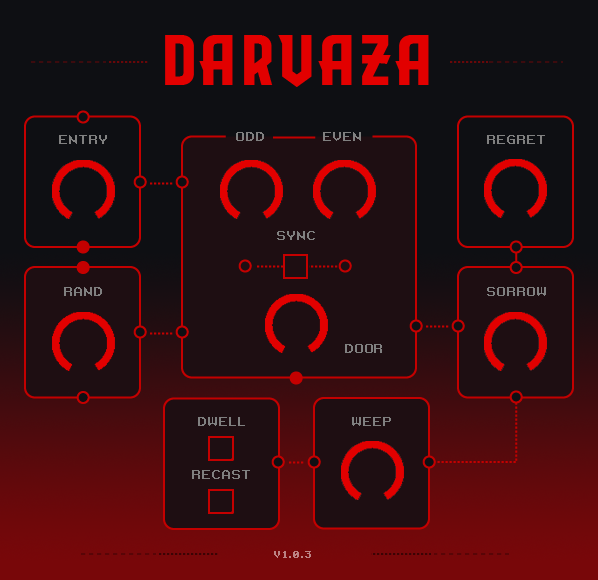
<style>
.page{position:relative;width:598px;height:580px;background:#0e0f13}
.page>*{position:absolute;margin:0}
.t1{font:72px "EvilEmpire";letter-spacing:0.08em;color:#e20000;text-transform:uppercase}
.t2{font:12px "RetroGaming";letter-spacing:0.08em;color:#808080;text-transform:uppercase}
.t3{font:10px "RetroGaming";letter-spacing:0.075em;color:#bc8384}
</style>
<div class="page">
<p class="t1" style="left:165px;top:35px;width:264px;height:52px">DARVAZA</p>
<p class="t2" style="left:59px;top:135px;width:48px;height:9px">entry</p>
<p class="t2" style="left:236px;top:132px;width:28px;height:9px">odd</p>
<p class="t2" style="left:323px;top:132px;width:38px;height:9px">even</p>
<p class="t2" style="left:487px;top:135px;width:58px;height:9px">regret</p>
<p class="t2" style="left:277px;top:231px;width:38px;height:9px">sync</p>
<p class="t2" style="left:64px;top:287px;width:38px;height:9px">rand</p>
<p class="t2" style="left:487px;top:287px;width:59px;height:9px">sorrow</p>
<p class="t2" style="left:345px;top:344px;width:37px;height:9px">door</p>
<p class="t2" style="left:198px;top:417px;width:47px;height:9px">dwell</p>
<p class="t2" style="left:352px;top:417px;width:39px;height:9px">weep</p>
<p class="t2" style="left:192px;top:470px;width:58px;height:9px">recast</p>
<p class="t3" style="left:274px;top:551px;width:37px;height:7px">V1.0.3</p>
</div>
